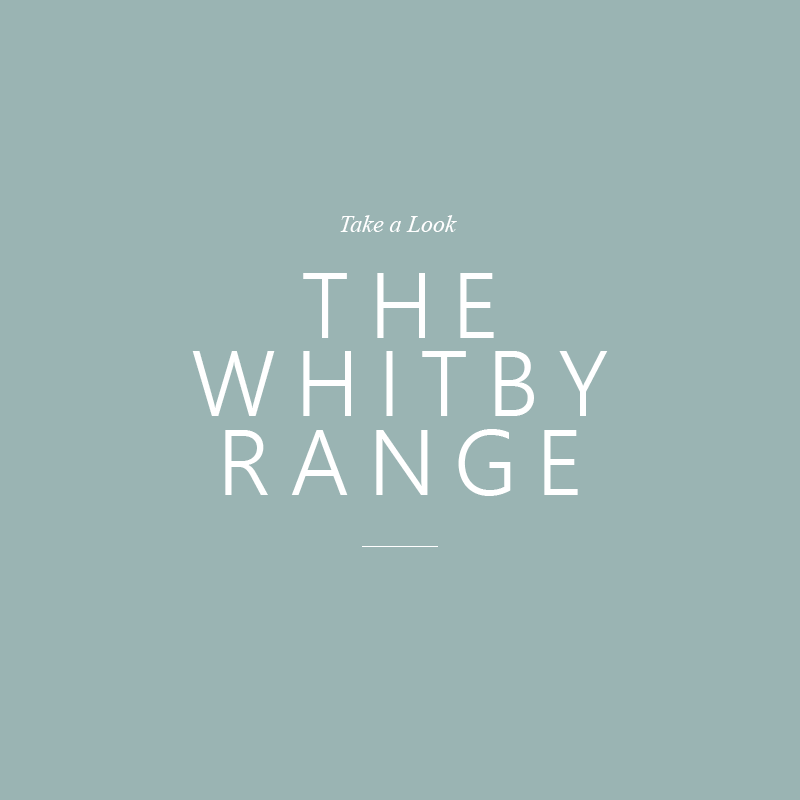
<style>
.page{position:relative;width:800px;height:800px;background:#9ab4b3}
.page>*{position:absolute;margin:0}
.t1{font:93.3px/65.3px "SegoeUI-Semilight";letter-spacing:0.2em;color:#ffffff}
.t2{font:43.5px/65.3px "SegoeUI";color:#ffffff}
.t3{font:24px/65.3px "TimesNewRomanPS-ItalicMT";color:#ffffff}
</style>
<div class="page">
<p class="t1" style="left:192px;top:215px;width:416px;height:281px;text-align:center"><span class="t2"><br><br><br></span><span class="t3">Take a Look<br></span>THE <br>WHITBY <br>RANGE</p>
</div>
